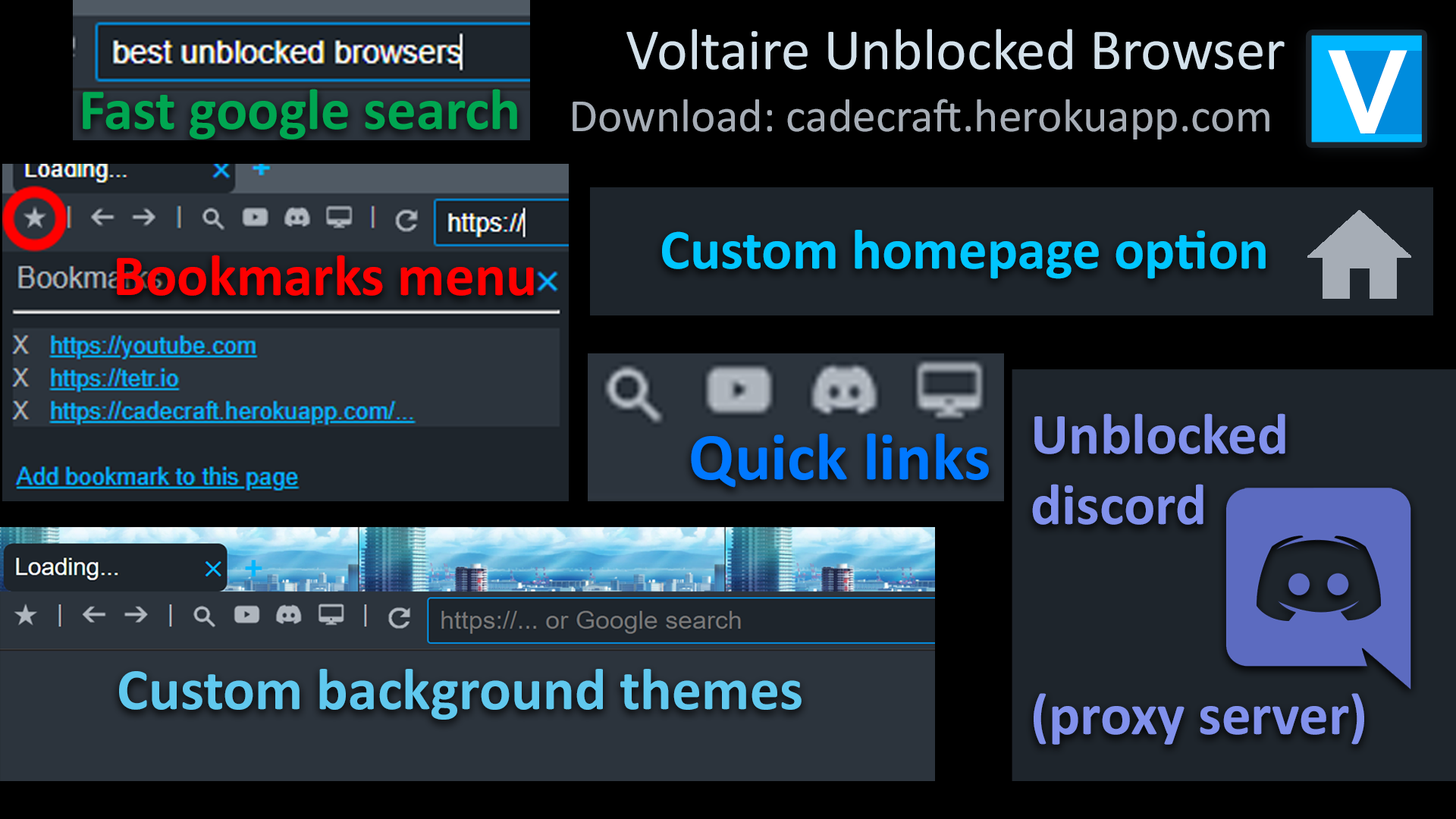
<style>
.page{position:relative;width:1456px;height:819px;background:#000000}
.page>*{position:absolute;margin:0}
.t1{font:58.6px "Calibri";color:#d3e1eb}
.t2{font:58.4px "Calibri-Bold";color:#00a651}
.t3{font:46.9px "Calibri";color:#a6adb6}
.t4{font:56.9px "Calibri-Bold";color:#00c6ff}
.t5{font:58.4px "Calibri-Bold";color:#ff0000}
.t6{font:58.4px "Calibri-Bold";color:#8191ec}
.t7{font:67.3px "Calibri-Bold";color:#0078ff}
.t8{font:59.2px "Calibri-Bold";color:#60c8ee}
</style>
<div class="page">
<p class="t1" style="left:626px;top:29px;width:659px;height:41px">Voltaire Unblocked Browser</p>
<p class="t2" style="left:83px;top:89px;width:434px;height:51px">Fast google search</p>
<p class="t3" style="left:573px;top:99px;width:696px;height:41px">Download: cadecraft.herokuapp.com</p>
<p class="t4" style="left:662px;top:230px;width:604px;height:49px">Custom homepage option</p>
<p class="t5" style="left:117px;top:255px;width:417px;height:41px">Bookmarks menu</p>
<p class="t6" style="left:1032px;top:413px;width:332px;height:332px">Unblocked<br>discord<br><br><br>(proxy server)</p>
<p class="t7" style="left:691px;top:433px;width:298px;height:55px">Quick links</p>
<p class="t8" style="left:119px;top:669px;width:683px;height:51px">Custom background themes</p>
</div>
